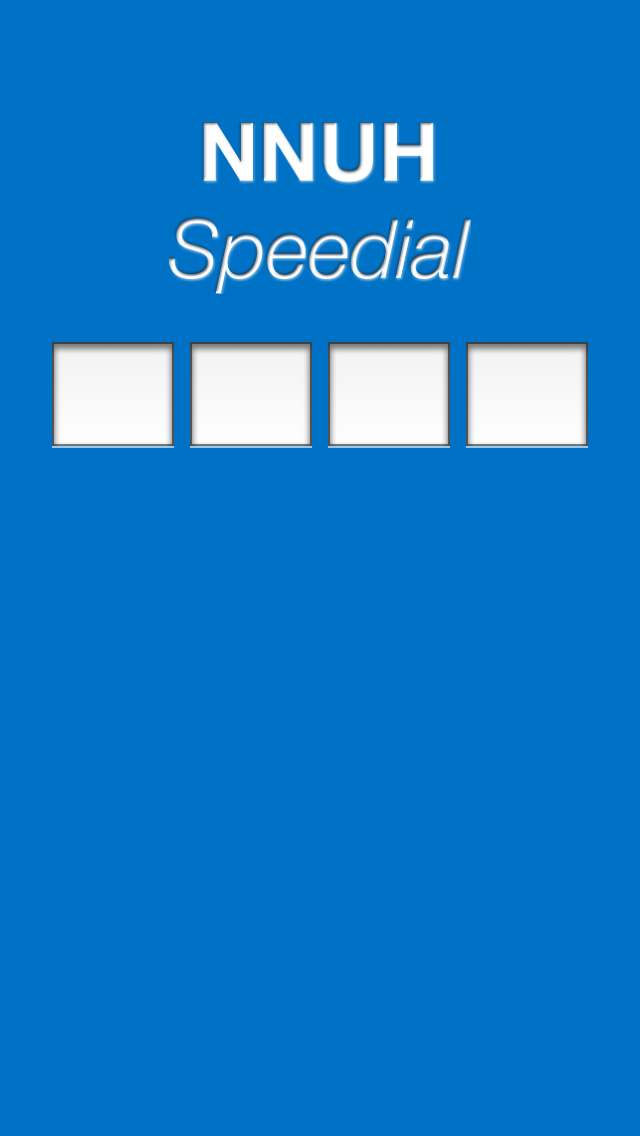
<style>
.page{position:relative;width:640px;height:1136px;background:#0072c6}
.page>*{position:absolute;margin:0}
.t1{font:81.5px "HelveticaNeue-LightItalic";color:#ffffff}
.t2{font:81.5px "HelveticaNeue-Bold";color:#ffffff}
</style>
<div class="page">
<p class="t1" style="left:169px;top:121px;width:303px;height:173px;text-align:center"><span class="t2">NNUH<br></span>Speedial</p>
</div>
